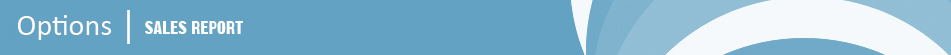
<style>
.page{position:relative;width:951px;height:55px;background:#63a2c3}
.page>*{position:absolute;margin:0}
.t1{font:30px "Calibri";color:#fdfafa}
.t2{font:18px "GothicNo13BT-Regular";color:#fffefe}
</style>
<div class="page">
<p class="t1" style="left:18px;top:15px;width:93px;height:25px">Options</p>
<p class="t2" style="left:145px;top:21px;width:98px;height:13px">SALES REPORT</p>
</div>
